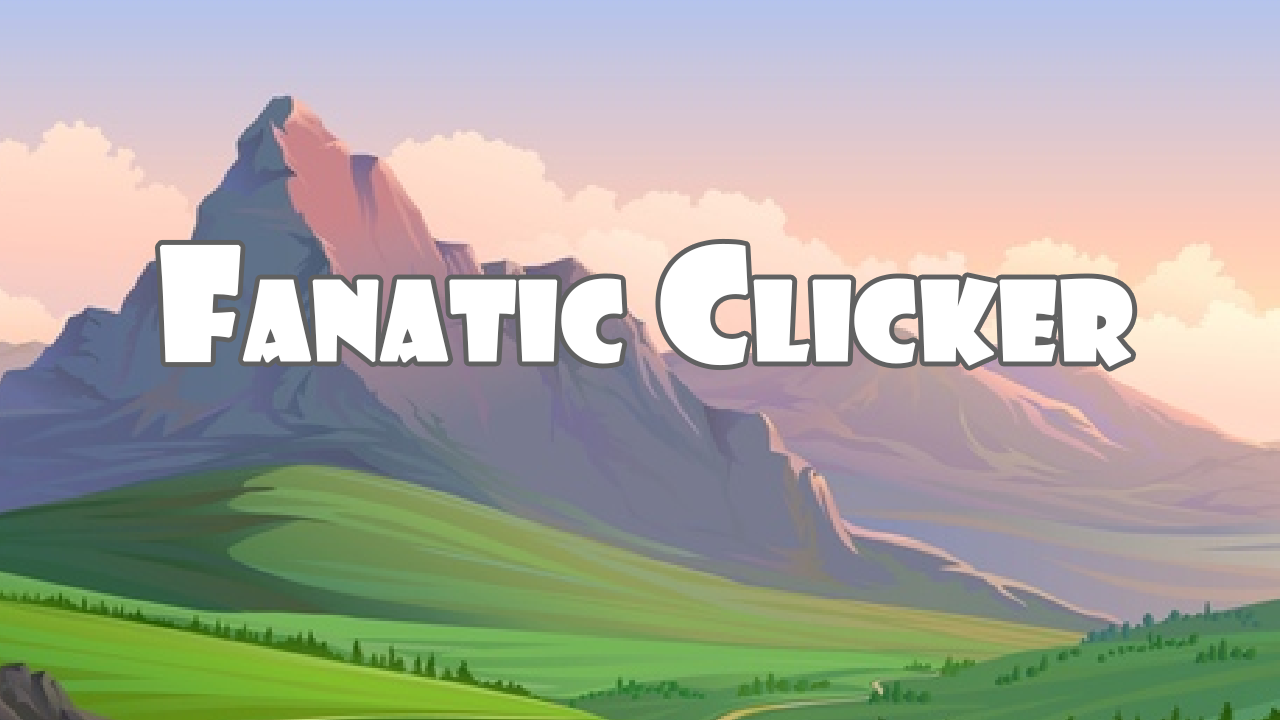
<style>
.page{position:relative;width:1280px;height:720px}
.page>*{position:absolute;margin:0}
.t1{font:150px "ShowcardGothic-Reg";color:#ffffff;font-variant:small-caps;font-weight:bold}
</style>
<div class="page">
<p class="t1" style="left:159px;top:243px;width:974px;height:124px">Fanatic Clicker</p>
</div>
